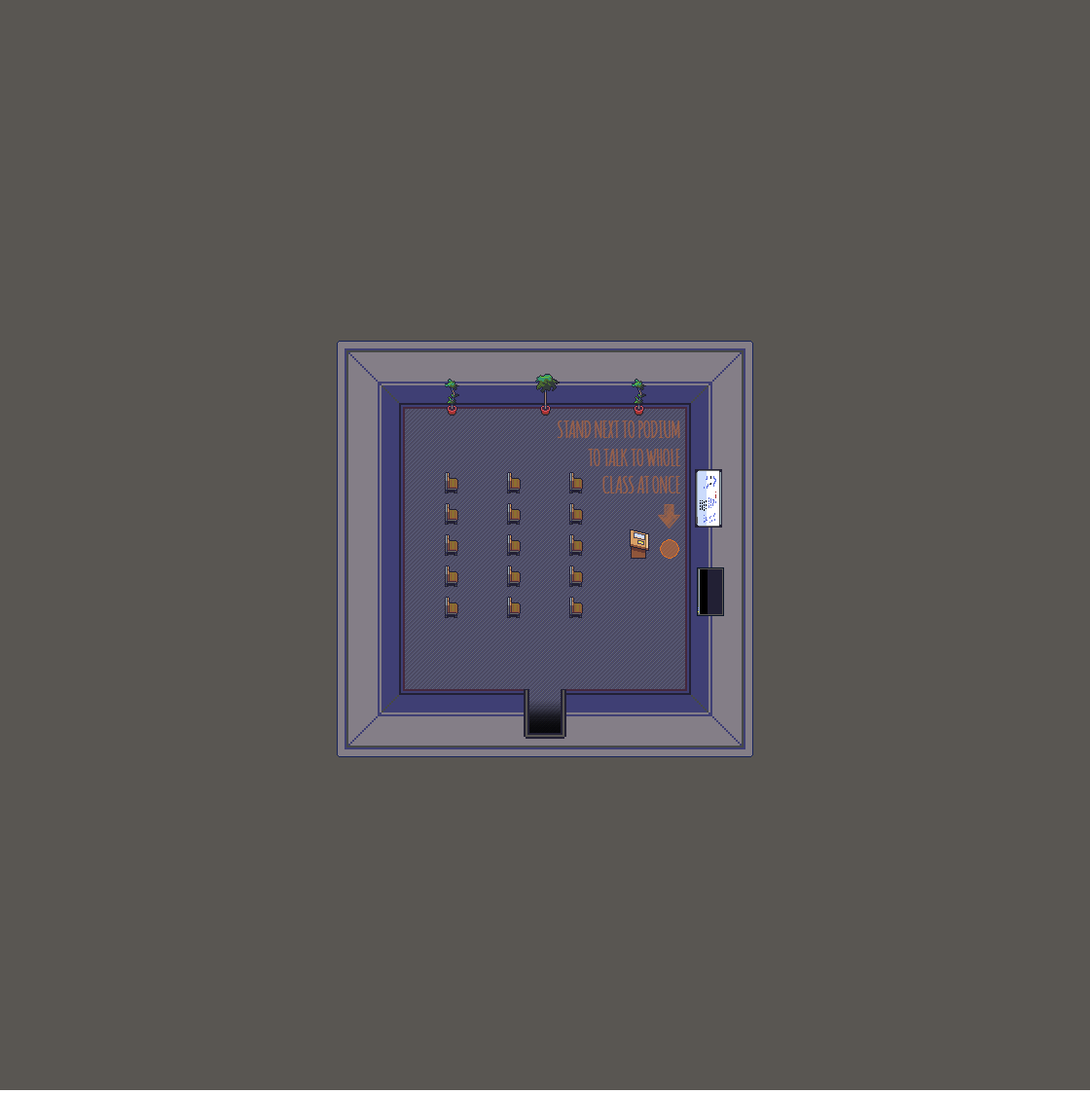
<style>
.page{position:relative;width:1090px;height:1094px;background:#595652}
.page>*{position:absolute;margin:0}
.t1{font:23.4px "Amatic-Bold";color:#9c6448}
</style>
<div class="page">
<p class="t1" style="left:557px;top:420px;width:124px;height:73px;text-align:right">STAND NEXT TO PODIUM<br>TO TALK TO WHOLE<br>CLASS AT ONCE</p>
</div>
